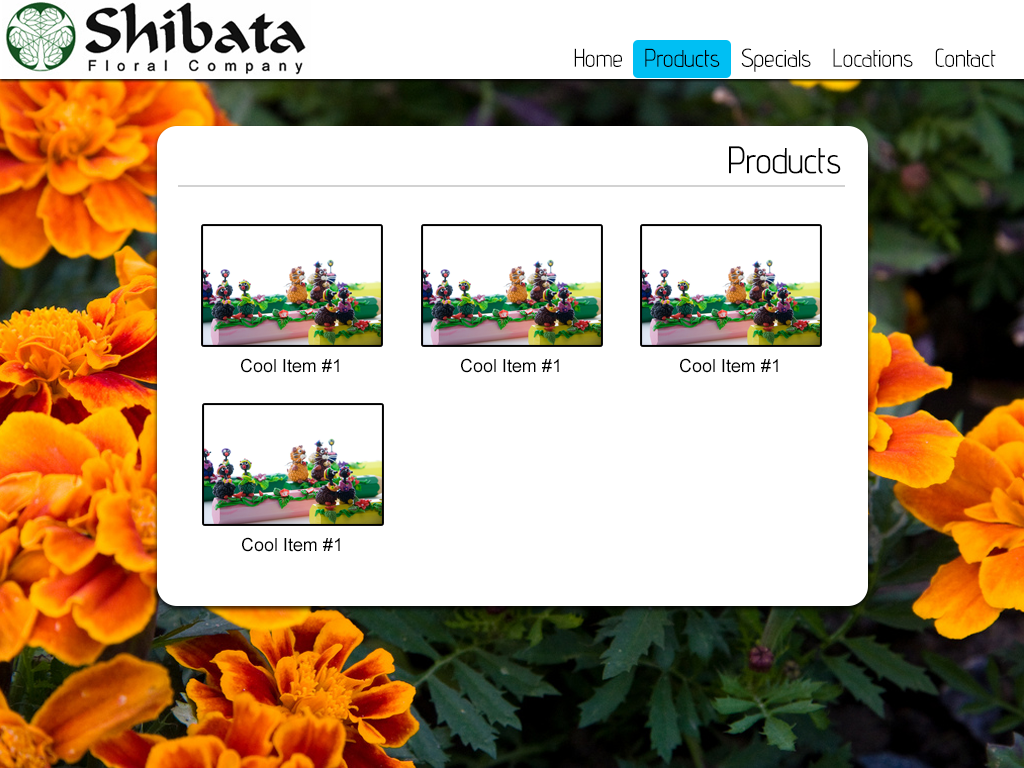
<style>
.page{position:relative;width:1024px;height:768px;background:#ffffff}
.page>*{position:absolute;margin:0}
.t1{font:24px "advent";color:#000000}
.t2{font:36px "advent";color:#000000}
.t3{font:18px "ArialMT";color:#000000}
</style>
<div class="page">
<p class="t1" style="left:574px;top:48px;width:422px;height:24px">Home   Products   Specials   Locations   Contact</p>
<p class="t2" style="left:729px;top:146px;width:112px;height:28px">Products</p>
<p class="t3" style="left:241px;top:358px;width:98px;height:15px">Cool Item #1</p>
<p class="t3" style="left:461px;top:358px;width:98px;height:15px">Cool Item #1</p>
<p class="t3" style="left:680px;top:358px;width:98px;height:15px">Cool Item #1</p>
<p class="t3" style="left:242px;top:537px;width:98px;height:15px">Cool Item #1</p>
</div>
